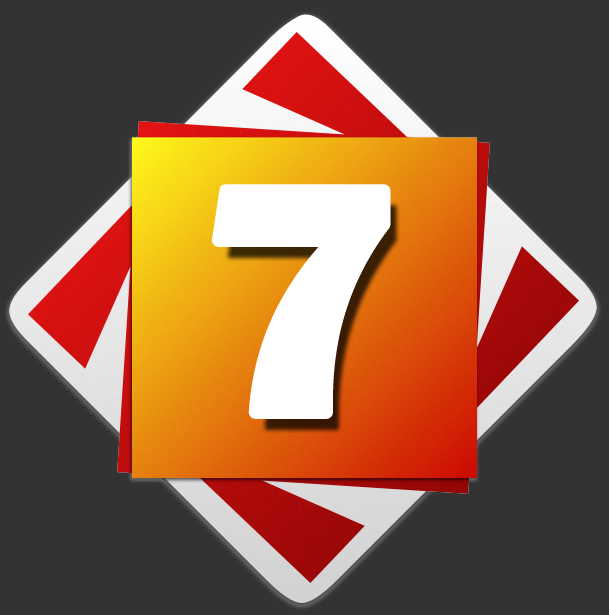
<style>
.page{position:relative;width:609px;height:615px;background:#333333}
.page>*{position:absolute;margin:0}
.t1{font:333.4px "BritannicBold";color:#ffffff;font-weight:bold}
</style>
<div class="page">
<p class="t1" style="left:216px;top:189px;width:170px;height:225px">7</p>
</div>
